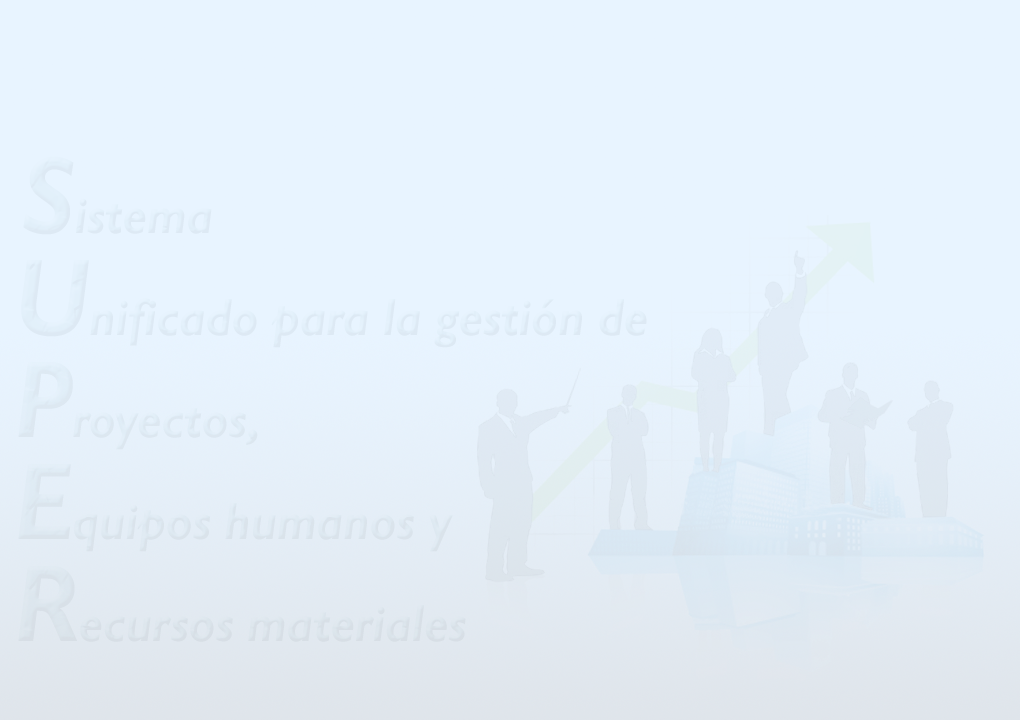
<style>
.page{position:relative;width:1020px;height:720px;background:#e8f4ff}
.page>*{position:absolute;margin:0}
.t1{font:52.8px/102px "GillSansMT-BoldItalic";color:#dfeaf4;scale:0.91 1}
.t2{font:33px/102px "GillSansMT-BoldItalic";color:#dfeaf4;scale:0.91 1}
.t3{font:110px/102px "GillSansMT-BoldItalic";color:#dfeaf4;scale:0.91 1}
</style>
<div class="page">
<p class="t1" style="left:18px;top:156px;width:629px;height:486px"><span class="t2"> </span><span class="t3">S</span>istema<br><span class="t3">U</span>nificado para la gestión de<br><span class="t3">P</span>royectos,<br><span class="t3">E</span>quipos humanos y<br><span class="t3">R</span>ecursos materiales</p>
</div>
